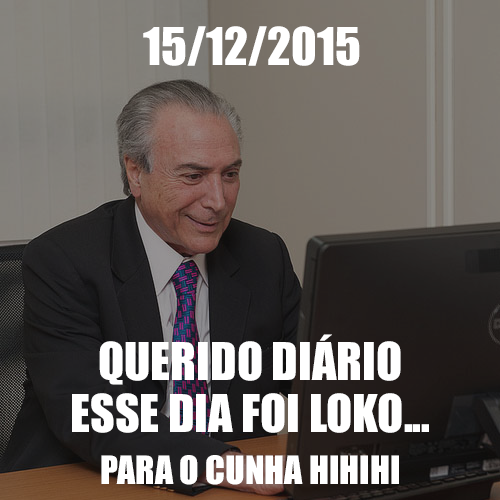
<style>
.page{position:relative;width:500px;height:500px}
.page>*{position:absolute;margin:0}
.t1{font:48px "Impact";color:#ffffff;text-transform:uppercase}
.t2{font:48px/16px "Impact";color:#ffffff;text-transform:uppercase}
.t3{font:36px/16px "Impact";color:#ffffff;text-transform:uppercase}
</style>
<div class="page">
<p class="t1" style="left:143px;top:26px;width:217px;height:40px">15/12/2015</p>
<p class="t2" style="left:72px;top:334px;width:357px;height:151px;text-align:center">querido diário<br><br>esse Dia foi loko...<br><br><span class="t3">para o cunha hihihi</span></p>
</div>
